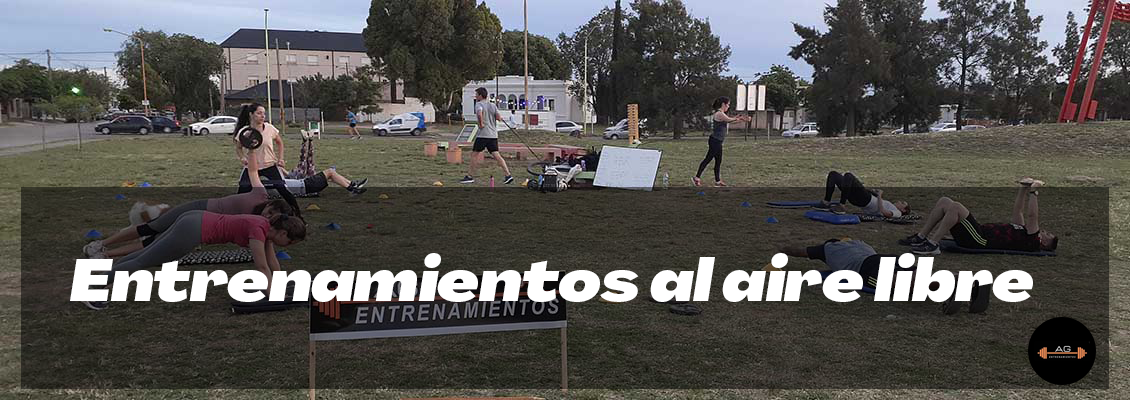
<style>
.page{position:relative;width:1130px;height:400px}
.page>*{position:absolute;margin:0}
.t1{font:58.3px "Agrandir-WideBlackItalic";color:#ffffff}
</style>
<div class="page">
<p class="t1" style="left:70px;top:253px;width:963px;height:49px">Entrenamientos al aire libre</p>
</div>
